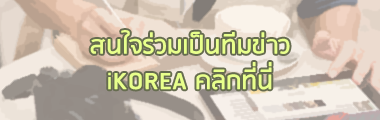
<style>
.page{position:relative;width:380px;height:120px}
.page>*{position:absolute;margin:0}
.t1{font:29.6px "RSU-Bold";color:#e8ff8c}
</style>
<div class="page">
<p class="t1" style="left:90px;top:30px;width:200px;height:60px;text-align:center">สนใจร่วมเป็นทีมข่าว<br>iKOREA คลิกที่นี่</p>
</div>
